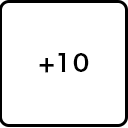
<style>
.page{position:relative;width:128px;height:128px;background:#ffffff}
.page>*{position:absolute;margin:0}
.t1{font:24px "HiraKakuPro-W6";color:#000000}
</style>
<div class="page">
<p class="t1" style="left:39px;top:53px;width:50px;height:20px">+10</p>
</div>
